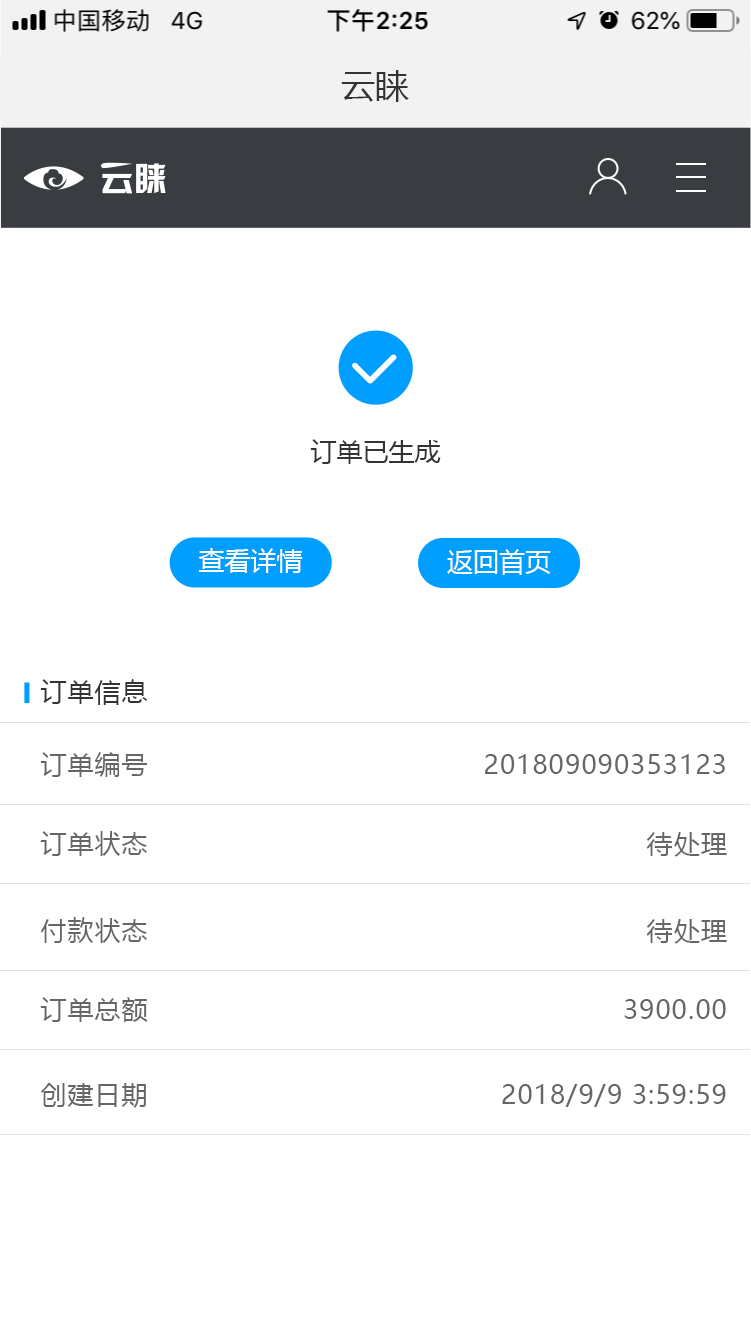
<style>
.page{position:relative;width:751px;height:1334px;background:#ffffff}
.page>*{position:absolute;margin:0}
.t1{font:34px "MicrosoftYaHei";color:#333333}
.t2{font:26px "MicrosoftYaHei";color:#333333}
.t3{font:26px "MicrosoftYaHei";color:#ffffff}
.t4{font:26px "MicrosoftYaHei";letter-spacing:0.04em;color:#333333}
.t5{font:26px "MicrosoftYaHei";letter-spacing:0.04em;color:#666666}
</style>
<div class="page">
<p class="t1" style="left:341px;top:70px;width:68px;height:32px">云睐</p>
<p class="t2" style="left:310px;top:439px;width:131px;height:25px">订单已生成</p>
<p class="t3" style="left:198px;top:548px;width:105px;height:25px">查看详情</p>
<p class="t3" style="left:447px;top:549px;width:104px;height:26px">返回首页</p>
<p class="t4" style="left:40px;top:679px;width:108px;height:26px">订单信息</p>
<p class="t5" style="left:40px;top:752px;width:107px;height:25px">订单编号</p>
<p class="t5" style="left:485px;top:754px;width:240px;height:20px">201809090353123</p>
<p class="t5" style="left:40px;top:831px;width:107px;height:25px">订单状态</p>
<p class="t5" style="left:646px;top:832px;width:81px;height:25px">待处理</p>
<p class="t5" style="left:41px;top:917px;width:106px;height:26px">付款状态</p>
<p class="t5" style="left:646px;top:919px;width:81px;height:25px">待处理</p>
<p class="t5" style="left:40px;top:997px;width:108px;height:25px">订单总额</p>
<p class="t5" style="left:624px;top:999px;width:102px;height:20px">3900.00</p>
<p class="t5" style="left:40px;top:1083px;width:106px;height:25px">创建日期</p>
<p class="t5" style="left:502px;top:1084px;width:224px;height:23px">2018/9/9 3:59:59</p>
</div>
